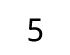
<style>
.page{position:relative;width:70px;height:55px;background:#ffffff}
.page>*{position:absolute;margin:0}
.t1{font:31.8px "DroidSans";color:#000000}
</style>
<div class="page">
<p class="t1" style="left:28px;top:18px;width:15px;height:24px">5</p>
</div>
